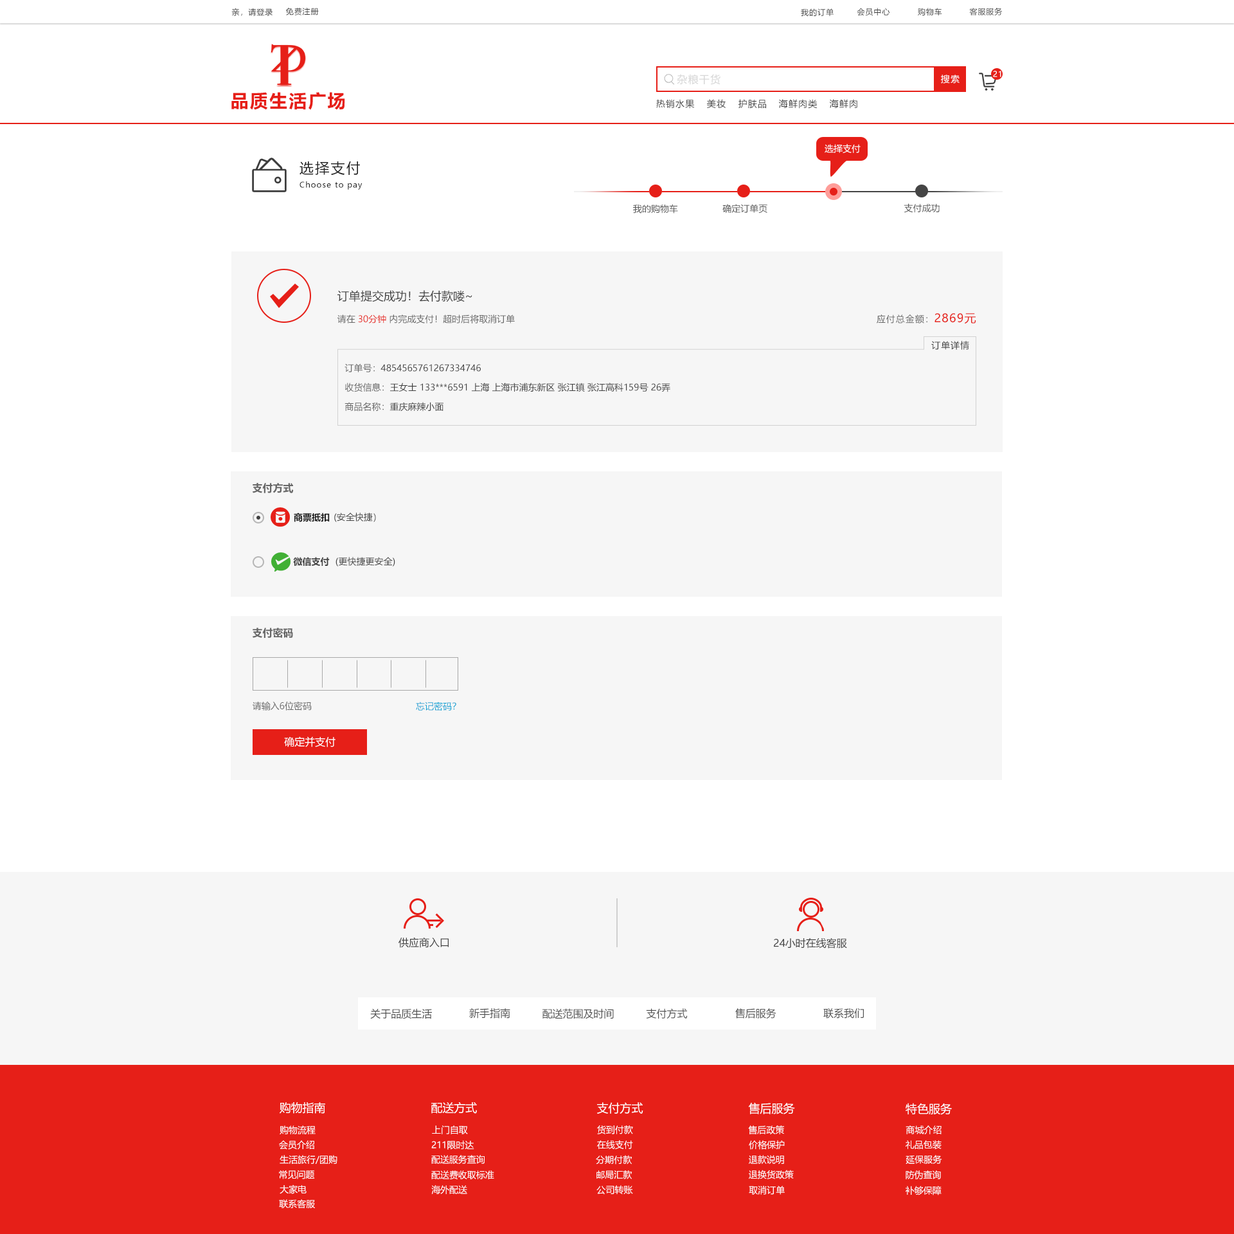
<style>
.page{position:relative;width:1234px;height:1234px;background:#ffffff}
.page>*{position:absolute;margin:0}
.t1{font:7.7px "MicrosoftYaHei";letter-spacing:0.08em;color:#404040}
.t2{font:10.3px "MicrosoftYaHei";letter-spacing:0.08em;color:#d6d6d6}
.t3{font:9px "MicrosoftYaHei";letter-spacing:0.08em;color:#ffffff}
.t4{font:7.7px "MicrosoftYaHei";letter-spacing:0.08em;color:#ffffff}
.t5{font:18px "MicrosoftYaHei-Bold";letter-spacing:0.08em;color:#e61f18}
.t6{font:9px "MicrosoftYaHei";letter-spacing:0.08em;color:#404040}
.t7{font:9px "MicrosoftYaHei";color:#ffffff}
.t8{font:14.1px "MicrosoftYaHei";letter-spacing:0.1em;color:#202020}
.t9{font:7.7px "MicrosoftYaHei";letter-spacing:0.1em;color:#202020}
.t10{font:9px "MicrosoftYaHei";color:#575757}
.t11{font:11.6px "MicrosoftYaHei";color:#404040}
.t12{font:9px "MicrosoftYaHei";color:#666666}
.t13{font:9px "MicrosoftYaHei";color:#e61f18}
.t14{font:9px "MicrosoftYaHei";letter-spacing:0.067em;color:#666666}
.t15{font:11.6px "MicrosoftYaHei";letter-spacing:0.067em;color:#e61f18}
.t16{font:9px "MicrosoftYaHei";letter-spacing:0.067em;color:#404040}
.t17{font:9px/19.3px "MicrosoftYaHei";color:#404040}
.t18{font:9px/19.3px "MicrosoftYaHei";color:#666666}
.t19{font:10.3px "MicrosoftYaHei-Bold";color:#686868}
.t20{font:9px "MicrosoftYaHei-Bold";color:#202020}
.t21{font:9px "MicrosoftYaHei";color:#404040}
.t22{font:9px "MicrosoftYaHei-Bold";color:#404040}
.t23{font:9px "MicrosoftYaHei";color:#686868}
.t24{font:9px "MicrosoftYaHei";color:#02a0d3}
.t25{font:10.3px "MicrosoftYaHei";color:#ffffff}
.t26{font:10.3px "MicrosoftYaHei";color:#404040}
.t27{font:10.3px "MicrosoftYaHei";color:#505050}
.t28{font:11.6px "MicrosoftYaHei";color:#ffffff}
</style>
<div class="page">
<p class="t1" style="left:231px;top:8px;width:42px;height:8px">亲，请登录</p>
<p class="t1" style="left:285px;top:8px;width:34px;height:7px">免费注册</p>
<p class="t1" style="left:801px;top:8px;width:33px;height:8px">我的订单</p>
<p class="t1" style="left:857px;top:8px;width:33px;height:8px">会员中心</p>
<p class="t1" style="left:918px;top:8px;width:24px;height:8px">购物车</p>
<p class="t1" style="left:969px;top:8px;width:34px;height:7px">客服服务</p>
<p class="t2" style="left:677px;top:74px;width:44px;height:11px">杂粮干货</p>
<p class="t3" style="left:941px;top:75px;width:19px;height:9px">搜索</p>
<p class="t4" style="left:993px;top:71px;width:9px;height:6px">21</p>
<p class="t5" style="left:231px;top:92px;width:114px;height:18px">品质生活广场</p>
<p class="t6" style="left:656px;top:99px;width:39px;height:10px">热销水果</p>
<p class="t6" style="left:707px;top:99px;width:19px;height:9px">美妆</p>
<p class="t6" style="left:739px;top:99px;width:27px;height:10px">护肤品</p>
<p class="t6" style="left:779px;top:99px;width:39px;height:10px">海鲜肉类</p>
<p class="t6" style="left:829px;top:99px;width:29px;height:10px">海鲜肉</p>
<p class="t7" style="left:825px;top:144px;width:36px;height:9px">选择支付</p>
<p class="t8" style="left:300px;top:161px;width:60px;height:15px">选择支付</p>
<p class="t9" style="left:300px;top:181px;width:63px;height:9px">Choose to pay</p>
<p class="t10" style="left:633px;top:204px;width:45px;height:9px">我的购物车</p>
<p class="t10" style="left:723px;top:204px;width:45px;height:9px">确定订单页</p>
<p class="t10" style="left:904px;top:203px;width:36px;height:10px">支付成功</p>
<p class="t11" style="left:338px;top:290px;width:135px;height:12px">订单提交成功！去付款喽~</p>
<p class="t12" style="left:338px;top:314px;width:177px;height:9px">请在 <span class="t13">30分钟 </span>内完成支付！超时后将取消订单</p>
<p class="t14" style="left:877px;top:313px;width:100px;height:11px">应付总金额：<span class="t15">2869元</span></p>
<p class="t16" style="left:932px;top:341px;width:37px;height:9px">订单详情</p>
<p class="t17" style="left:345px;top:363px;width:325px;height:48px"><span class="t18">订单号：</span>4854565761267334746<br><span class="t18">收货信息：</span>王女士 133***6591 上海 上海市浦东新区 张江镇 张江高科159号 26弄<br><span class="t18">商品名称：</span>重庆麻辣小面</p>
<p class="t19" style="left:252px;top:483px;width:42px;height:10px">支付方式</p>
<p class="t20" style="left:294px;top:512px;width:36px;height:10px">商票抵扣</p>
<p class="t21" style="left:334px;top:512px;width:42px;height:10px">(安全快捷）</p>
<p class="t22" style="left:293px;top:557px;width:37px;height:9px">微信支付</p>
<p class="t21" style="left:336px;top:557px;width:59px;height:9px">(更快捷更安全)</p>
<p class="t19" style="left:252px;top:627px;width:41px;height:11px">支付密码</p>
<p class="t23" style="left:253px;top:701px;width:59px;height:9px">请输入6位密码</p>
<p class="t24" style="left:416px;top:701px;width:40px;height:9px">忘记密码？</p>
<p class="t25" style="left:284px;top:736px;width:52px;height:11px">确定并支付</p>
<p class="t26" style="left:399px;top:937px;width:50px;height:11px">供应商入口</p>
<p class="t26" style="left:774px;top:937px;width:73px;height:11px">24小时在线客服</p>
<p class="t27" style="left:370px;top:1008px;width:62px;height:11px">关于品质生活</p>
<p class="t27" style="left:469px;top:1007px;width:41px;height:11px">新手指南</p>
<p class="t27" style="left:543px;top:1008px;width:71px;height:11px">配送范围及时间</p>
<p class="t27" style="left:646px;top:1008px;width:42px;height:10px">支付方式</p>
<p class="t27" style="left:735px;top:1008px;width:42px;height:10px">售后服务</p>
<p class="t27" style="left:824px;top:1008px;width:40px;height:10px">联系我们</p>
<p class="t28" style="left:280px;top:1102px;width:45px;height:11px">购物指南</p>
<p class="t28" style="left:431px;top:1102px;width:46px;height:11px">配送方式</p>
<p class="t28" style="left:597px;top:1102px;width:47px;height:11px">支付方式</p>
<p class="t28" style="left:748px;top:1102px;width:47px;height:12px">售后服务</p>
<p class="t28" style="left:906px;top:1102px;width:46px;height:13px">特色服务</p>
<p class="t7" style="left:280px;top:1125px;width:36px;height:9px">购物流程</p>
<p class="t7" style="left:432px;top:1125px;width:36px;height:9px">上门自取</p>
<p class="t7" style="left:597px;top:1125px;width:36px;height:9px">货到付款</p>
<p class="t7" style="left:748px;top:1125px;width:36px;height:9px">售后政策</p>
<p class="t7" style="left:906px;top:1125px;width:36px;height:9px">商城介绍</p>
<p class="t7" style="left:279px;top:1140px;width:35px;height:9px">会员介绍</p>
<p class="t7" style="left:431px;top:1140px;width:43px;height:9px">211限时达</p>
<p class="t7" style="left:597px;top:1140px;width:36px;height:9px">在线支付</p>
<p class="t7" style="left:749px;top:1140px;width:36px;height:9px">价格保护</p>
<p class="t7" style="left:906px;top:1140px;width:36px;height:9px">礼品包装</p>
<p class="t7" style="left:280px;top:1155px;width:58px;height:9px">生活旅行/团购</p>
<p class="t7" style="left:431px;top:1155px;width:54px;height:9px">配送服务查询</p>
<p class="t7" style="left:596px;top:1155px;width:36px;height:9px">分期付款</p>
<p class="t7" style="left:749px;top:1155px;width:35px;height:9px">退款说明</p>
<p class="t7" style="left:906px;top:1155px;width:36px;height:9px">延保服务</p>
<p class="t7" style="left:749px;top:1169px;width:45px;height:10px">退换货政策</p>
<p class="t7" style="left:279px;top:1170px;width:36px;height:9px">常见问题</p>
<p class="t7" style="left:431px;top:1170px;width:63px;height:9px">配送费收取标准</p>
<p class="t7" style="left:597px;top:1170px;width:35px;height:9px">邮局汇款</p>
<p class="t7" style="left:906px;top:1170px;width:35px;height:9px">防伪查询</p>
<p class="t7" style="left:280px;top:1184px;width:27px;height:10px">大家电</p>
<p class="t7" style="left:431px;top:1185px;width:36px;height:9px">海外配送</p>
<p class="t7" style="left:597px;top:1185px;width:36px;height:9px">公司转账</p>
<p class="t7" style="left:749px;top:1185px;width:36px;height:9px">取消订单</p>
<p class="t7" style="left:906px;top:1185px;width:36px;height:10px">补够保障</p>
<p class="t7" style="left:279px;top:1199px;width:36px;height:9px">联系客服</p>
</div>
